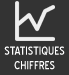
<style>
.page{position:relative;width:69px;height:75px;background:#333333}
.page>*{position:absolute;margin:0}
.t1{font:11.2px "BlueHighwayD-Regular";color:#ffffff;text-transform:uppercase}
</style>
<div class="page">
<p class="t1" style="left:4px;top:46px;width:61px;height:24px;text-align:center">statistiques<br>chiffres</p>
</div>
